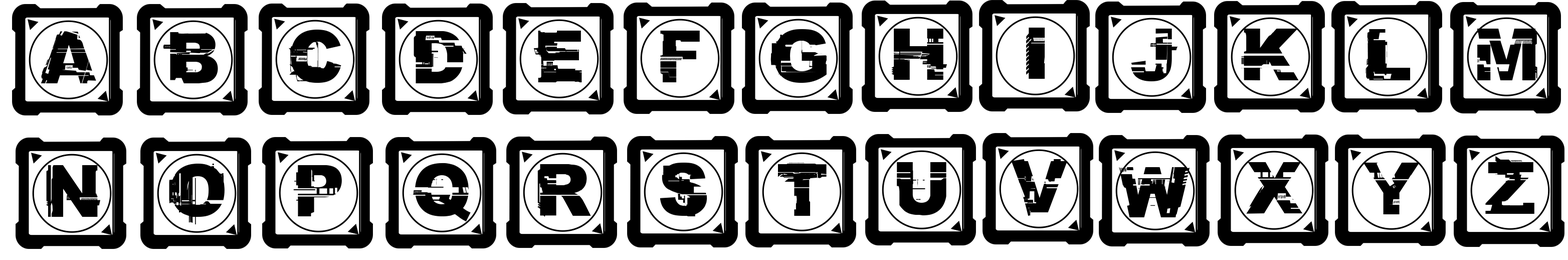
<style>
.page{position:relative;width:1568px;height:260px;background:#ffffff}
.page>*{position:absolute;margin:0}
.t1{font:65.4px "CFGlitchCity-Regular";color:#000000}
.t2{font:63.1px "CFGlitchCity-Regular";color:#000000;scale:0.96 1}
</style>
<div class="page">
<p class="t1" style="left:289px;top:30px;width:52px;height:53px">C</p>
<p class="t1" style="left:770px;top:29px;width:57px;height:54px">G</p>
<p class="t1" style="left:891px;top:29px;width:56px;height:51px">H</p>
<p class="t1" style="left:1026px;top:28px;width:19px;height:51px">I</p>
<p class="t1" style="left:1131px;top:29px;width:48px;height:52px">J</p>
<p class="t1" style="left:1241px;top:29px;width:58px;height:51px">K</p>
<p class="t1" style="left:1365px;top:29px;width:46px;height:51px">L</p>
<p class="t1" style="left:1477px;top:29px;width:60px;height:51px">M</p>
<p class="t1" style="left:41px;top:31px;width:55px;height:52px">A</p>
<p class="t1" style="left:163px;top:32px;width:55px;height:51px">B</p>
<p class="t1" style="left:414px;top:31px;width:53px;height:52px">D</p>
<p class="t1" style="left:533px;top:31px;width:49px;height:52px">E</p>
<p class="t1" style="left:660px;top:31px;width:40px;height:51px">F</p>
<p class="t1" style="left:897px;top:162px;width:49px;height:53px">U</p>
<p class="t1" style="left:1011px;top:159px;width:57px;height:57px">V</p>
<p class="t1" style="left:1246px;top:162px;width:56px;height:52px">X</p>
<p class="t1" style="left:1485px;top:156px;width:49px;height:58px">Z</p>
<p class="t1" style="left:46px;top:165px;width:54px;height:52px">N</p>
<p class="t1" style="left:169px;top:163px;width:56px;height:61px">O</p>
<p class="t1" style="left:293px;top:165px;width:49px;height:51px">P</p>
<p class="t1" style="left:410px;top:162px;width:61px;height:59px">Q</p>
<p class="t1" style="left:537px;top:164px;width:54px;height:53px">R</p>
<p class="t1" style="left:650px;top:162px;width:57px;height:54px">S</p>
<p class="t1" style="left:777px;top:162px;width:50px;height:54px">T</p>
<p class="t2" style="left:1119px;top:167px;width:71px;height:50px">W</p>
<p class="t1" style="left:1363px;top:162px;width:57px;height:52px">Y</p>
</div>
